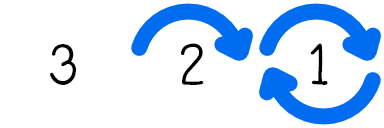
<style>
.page{position:relative;width:384px;height:128px;background:#ffffff}
.page>*{position:absolute;margin:0}
.t1{font:87.5px "WaffleRegular";color:#000000}
</style>
<div class="page">
<p class="t1" style="left:50px;top:44px;width:26px;height:41px">3</p>
<p class="t1" style="left:181px;top:43px;width:23px;height:42px">2</p>
<p class="t1" style="left:310px;top:43px;width:18px;height:42px">1</p>
</div>
